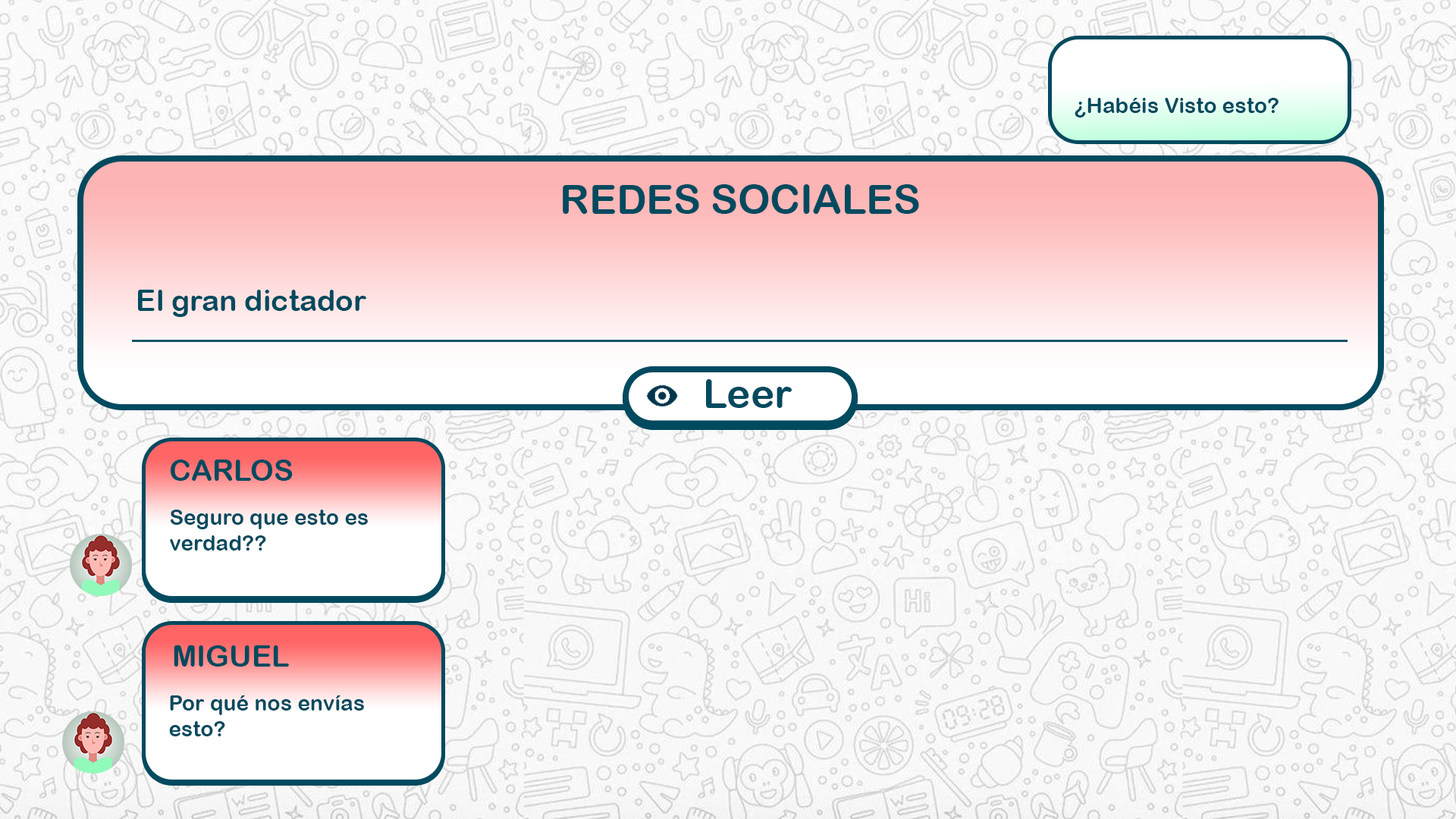
<style>
.page{position:relative;width:1456px;height:819px}
.page>*{position:absolute;margin:0}
.t1{font:21.5px "ArialRoundedMTBold";color:#004a5f}
.t2{font:40.6px "ArialRoundedMTBold";color:#004a5f}
.t3{font:29.6px "ArialRoundedMTBold";color:#004a5f}
.t4{font:39.8px "ArialRoundedMTBold";color:#004a5f}
</style>
<div class="page">
<p class="t1" style="left:1075px;top:98px;width:204px;height:20px">¿Habéis Visto esto?</p>
<p class="t2" style="left:563px;top:184px;width:356px;height:30px">REDES SOCIALES</p>
<p class="t3" style="left:138px;top:290px;width:228px;height:27px">El gran dictador</p>
<p class="t4" style="left:706px;top:379px;width:86px;height:29px">Leer</p>
<p class="t3" style="left:170px;top:460px;width:123px;height:21px">CARLOS</p>
<p class="t1" style="left:170px;top:510px;width:198px;height:41px">Seguro que esto es <br>verdad??</p>
<p class="t3" style="left:174px;top:645px;width:115px;height:22px">MIGUEL</p>
<p class="t1" style="left:169px;top:695px;width:195px;height:41px">Por qué nos envías<br>esto?</p>
</div>
